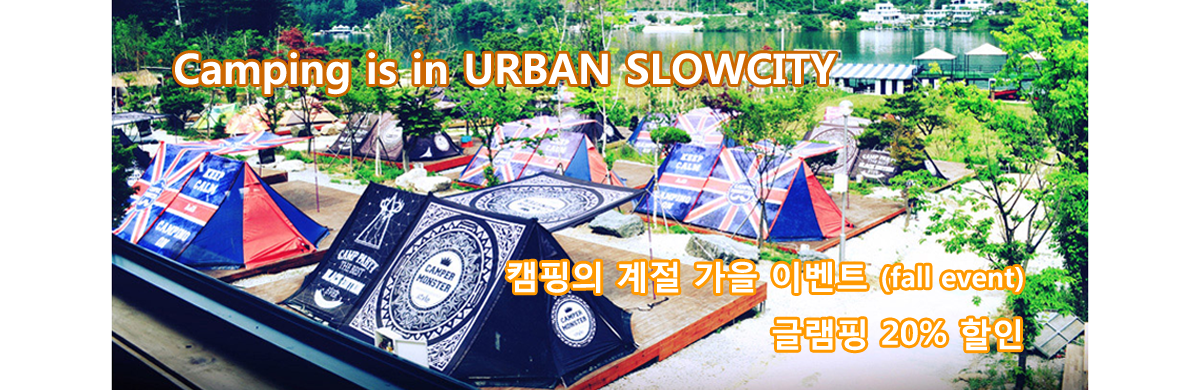
<style>
.page{position:relative;width:1200px;height:390px;background:#ffffff}
.page>*{position:absolute;margin:0}
.t1{font:41.9px "MalgunGothicBold";color:#ffffff}
.t2{font:32.8px "MalgunGothicBold";color:#ffffff}
.t3{font:28px "MalgunGothicBold";color:#ffffff}
</style>
<div class="page">
<p class="t1" style="left:175px;top:52px;width:661px;height:43px">Camping is in URBAN SLOWCITY</p>
<p class="t2" style="left:507px;top:261px;width:516px;height:90px;text-align:right">캠핑의 계절 가을 이벤트 <span class="t3">(fall event)</span><br>글램핑 20% 할인</p>
</div>
